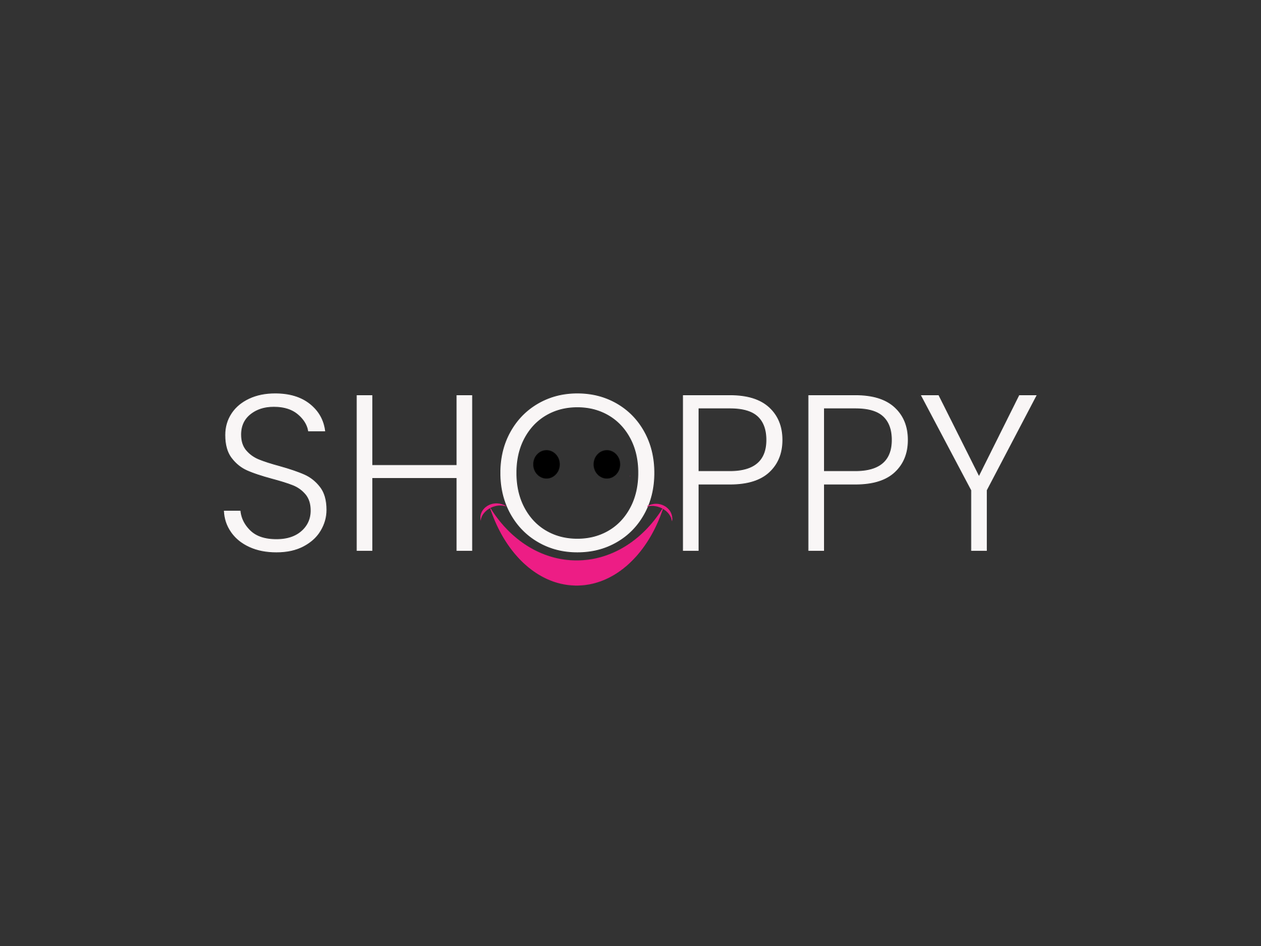
<style>
.page{position:relative;width:1261px;height:946px;background:#333333}
.page>*{position:absolute;margin:0}
.t1{font:222.4px "Poppins-Light";color:#f9f6f6}
</style>
<div class="page">
<p class="t1" style="left:224px;top:393px;width:813px;height:159px">SHOPPY</p>
</div>
